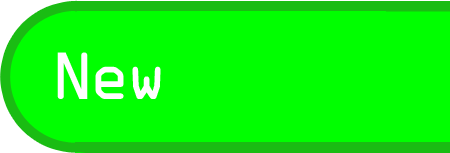
<style>
.page{position:relative;width:450px;height:153px;background:#00ff00}
.page>*{position:absolute;margin:0}
.t1{font:59.8px "OCRAStd";letter-spacing:-0.1em;color:#ffffff}
</style>
<div class="page">
<p class="t1" style="left:57px;top:52px;width:104px;height:47px">New</p>
</div>
